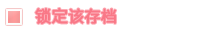
<style>
.page{position:relative;width:218px;height:30px;background:#ffffff}
.page>*{position:absolute;margin:0}
.t1{font:16px "SourceHanSansSC-Regular";color:#f97887;font-weight:bold}
</style>
<div class="page">
<p class="t1" style="left:35px;top:8px;width:81px;height:16px">锁定该存档</p>
</div>
